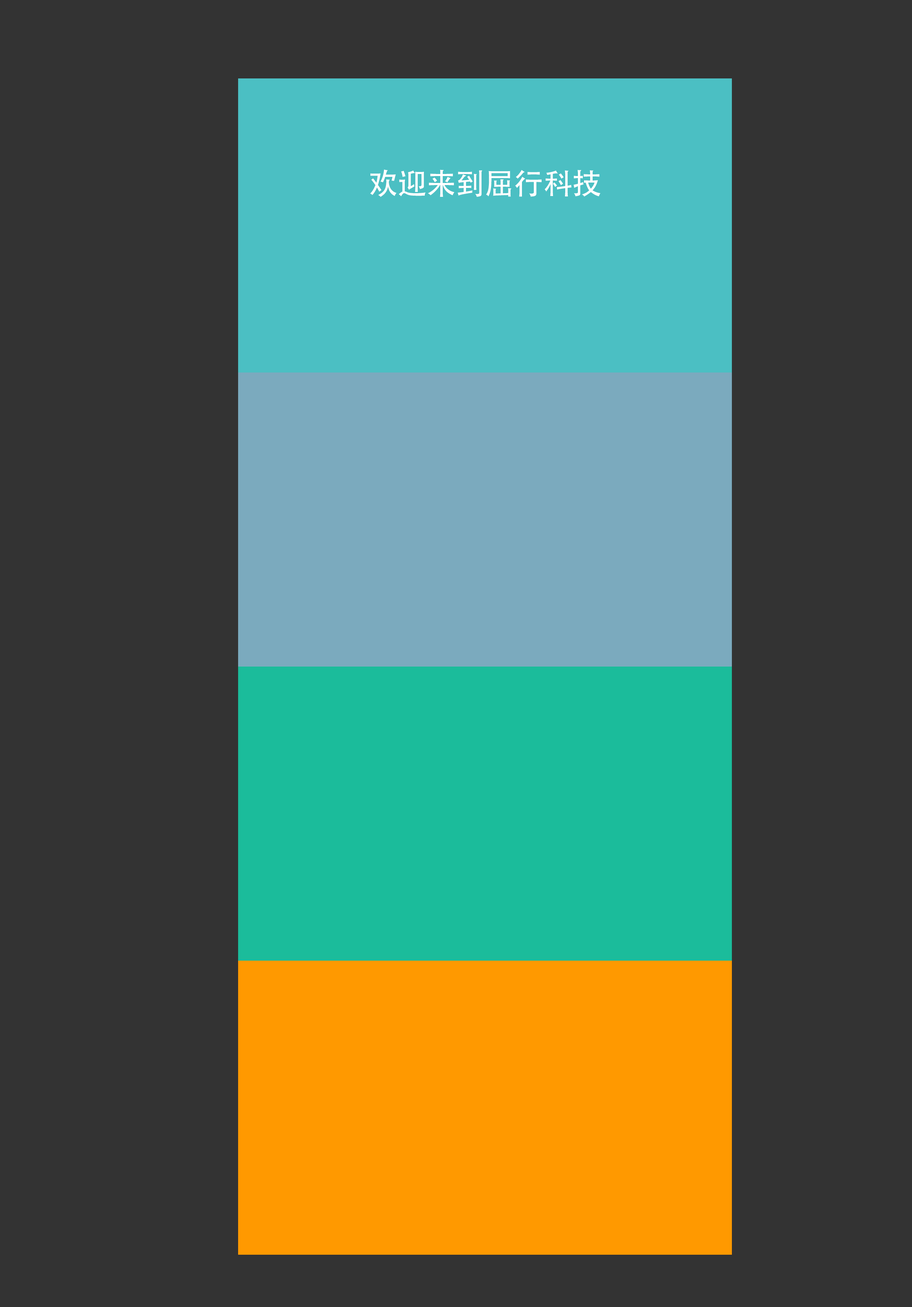
<style>
.page{position:relative;width:912px;height:1307px;background:#333333}
.page>*{position:absolute;margin:0}
.t1{font:29.4px "AdobeHeitiStd-Regular";letter-spacing:-0.01em;color:#ffffff}
</style>
<div class="page">
<p class="t1" style="left:370px;top:170px;width:231px;height:27px">欢迎来到屈行科技</p>
</div>
